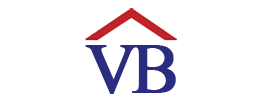
<style>
.page{position:relative;width:280px;height:100px;background:#ffffff}
.page>*{position:absolute;margin:0}
.t1{font:70px "TimesNewRomanPSMT";letter-spacing:-0.09em;color:#2a2c7f;font-weight:bold}
</style>
<div class="page">
<p class="t1" style="left:85px;top:45px;width:91px;height:49px">VB</p>
</div>
